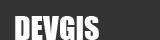
<style>
.page{position:relative;width:160px;height:40px;background:#333333}
.page>*{position:absolute;margin:0}
.t1{font:30px "Impact";color:#fffefe}
</style>
<div class="page">
<p class="t1" style="left:15px;top:16px;width:84px;height:24px">DEVGIS</p>
</div>
